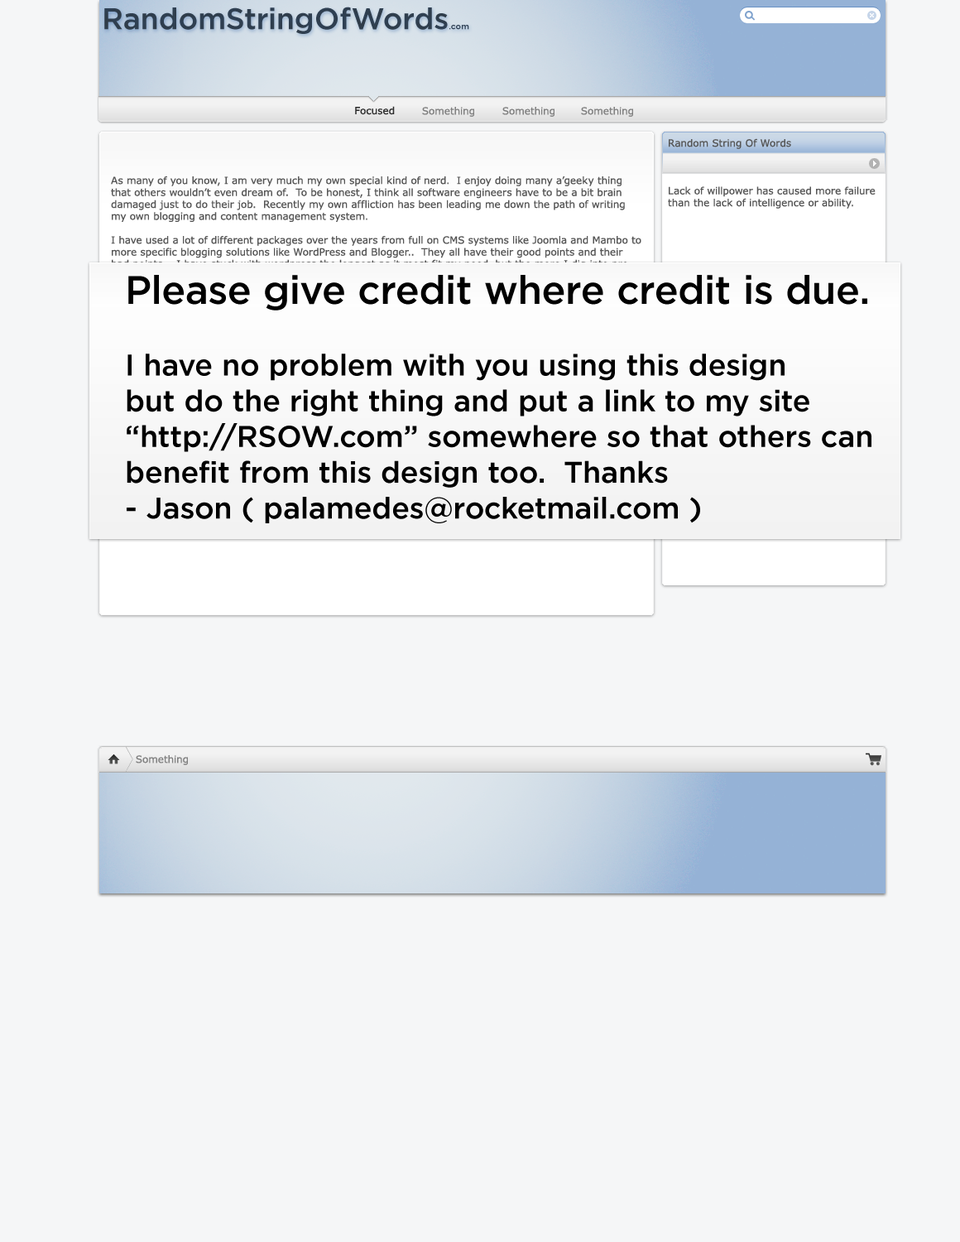
<style>
.page{position:relative;width:960px;height:1242px;background:#f5f6f7}
.page>*{position:absolute;margin:0}
.t1{font:29.8px "GothamMedium";color:#2f383f}
.t2{font:8.3px "GothamMedium";color:#2f383f}
.t3{font:9.9px "Verdana";color:#2b2b2b}
.t4{font:9.9px "Verdana";color:#7f7f7f}
.t5{font:9.9px "Verdana";color:#555555}
.t6{font:29.8px "GothamMedium";color:#000000}
.t7{font:39.7px "GothamMedium";color:#000000}
</style>
<div class="page">
<p class="t1" style="left:104px;top:7px;width:365px;height:27px">RandomStringOfWords<span class="t2">.com</span></p>
<p class="t3" style="left:355px;top:106px;width:40px;height:9px">Focused</p>
<p class="t4" style="left:422px;top:107px;width:52px;height:10px">Something</p>
<p class="t4" style="left:502px;top:107px;width:53px;height:10px">Something</p>
<p class="t4" style="left:581px;top:107px;width:52px;height:10px">Something</p>
<p class="t5" style="left:668px;top:138px;width:208px;height:71px">Random String Of Words<br><br><br><br>Lack of willpower has caused more failure than the lack of intelligence or ability.</p>
<p class="t6" style="left:127px;top:275px;width:745px;height:248px"><span class="t7">Please give credit where credit is due.<br></span><br>I have no problem with you using this design<br>but do the right thing and put a link to my site<br>“http://RSOW.com” somewhere so that others can <br>benefit from this design too.  Thanks<br>- Jason ( palamedes@rocketmail.com )</p>
<p class="t4" style="left:136px;top:755px;width:52px;height:10px">Something</p>
</div>
